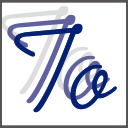
<style>
.page{position:relative;width:128px;height:128px;background:#ffffff}
.page>*{position:absolute;margin:0}
.t1{font:119.6px "TSTPenC";color:#5f629e;font-weight:bold}
.t2{font:119.6px "TSTPenC";color:#071f77;font-weight:bold}
</style>
<div class="page">
<p class="t1" style="left:7px;top:14px;width:103px;height:90px">To</p>
<p class="t2" style="left:14px;top:23px;width:103px;height:90px">To</p>
<p class="t2" style="left:14px;top:23px;width:103px;height:90px">To</p>
</div>
